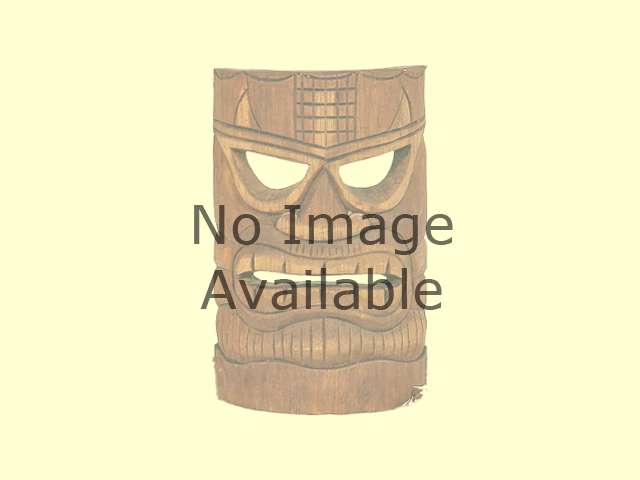
<style>
.page{position:relative;width:640px;height:480px;background:#feffd2}
.page>*{position:absolute;margin:0}
.t1{font:54px "Verdana";color:#584b3d}
</style>
<div class="page">
<p class="t1" style="left:194px;top:205px;width:259px;height:105px;text-align:center">No Image<br>Available</p>
</div>
